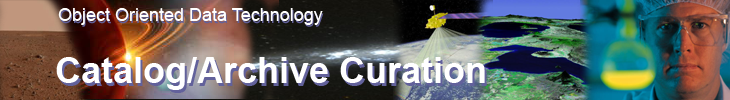
<style>
.page{position:relative;width:730px;height:100px}
.page>*{position:absolute;margin:0}
.t1{font:18px "ArialMT";color:#ffffff}
.t2{font:18px "ArialMT"}
.t3{font:36px "Arial-BoldMT";color:#ffffff}
.t4{font:36px "Arial-BoldMT"}
</style>
<div class="page">
<p class="t1" style="left:58px;top:8px;width:265px;height:17px">Object Oriented Data Technology</p>
<p class="t2" style="left:60px;top:9px;width:264px;height:18px">Object Oriented Data Technology</p>
<p class="t3" style="left:56px;top:57px;width:429px;height:33px">Catalog/Archive Curation</p>
<p class="t4" style="left:58px;top:60px;width:429px;height:33px">Catalog/Archive Curation</p>
</div>
